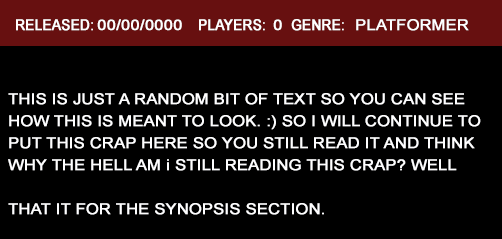
<style>
.page{position:relative;width:502px;height:239px;background:#000000}
.page>*{position:absolute;margin:0}
.t1{font:15px "ArialMT";color:#ffffff;font-weight:bold;scale:0.9 1}
.t2{font:15px "ArialMT";color:#ffffff;font-weight:bold;scale:1.08 1}
.t3{font:15px "ArialMT";color:#fefeff;font-weight:bold;scale:1.08 1}
.t4{font:15px/22px "ArialMT";color:#fefeff;font-weight:bold;scale:1.08 1}
</style>
<div class="page">
<p class="t1" style="left:16px;top:19px;width:77px;height:12px">RELEASED:</p>
<p class="t2" style="left:97px;top:19px;width:85px;height:12px">00/00/0000</p>
<p class="t1" style="left:199px;top:19px;width:66px;height:12px">PLAYERS:</p>
<p class="t2" style="left:273px;top:19px;width:9px;height:12px">0</p>
<p class="t1" style="left:291px;top:19px;width:53px;height:12px">GENRE:</p>
<p class="t3" style="left:356px;top:19px;width:113px;height:12px">PLATFORMER</p>
<p class="t4" style="left:8px;top:93px;width:473px;height:122px">THIS IS JUST A RANDOM BIT OF TEXT SO YOU CAN SEE HOW THIS IS MEANT TO LOOK. :) SO I WILL CONTINUE TO PUT THIS CRAP HERE SO YOU STILL READ IT AND THINK WHY THE HELL AM i STILL READING THIS CRAP? WELL <br><br>THAT IT FOR THE SYNOPSIS SECTION.</p>
</div>
